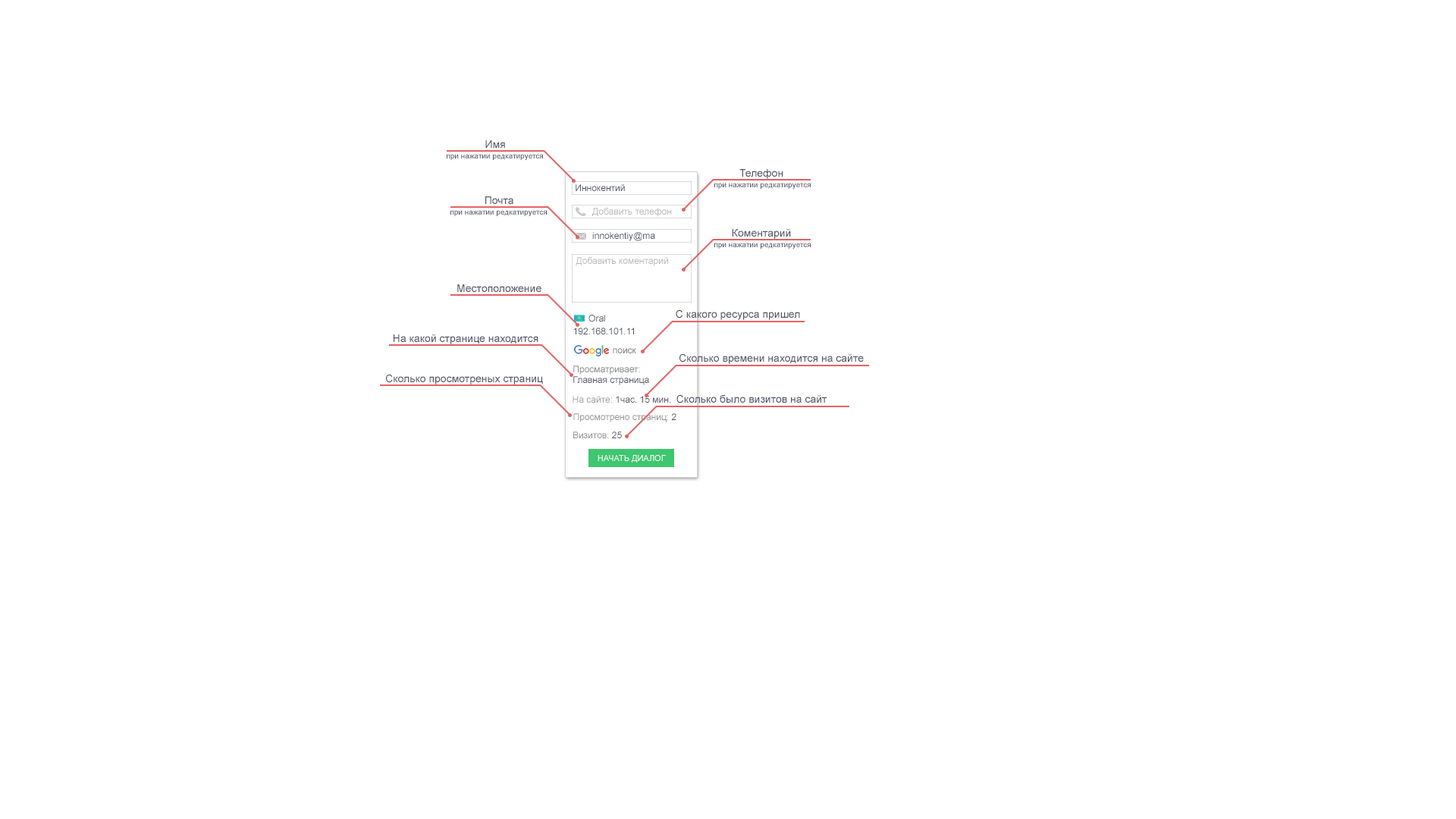
<style>
.page{position:relative;width:1456px;height:819px;background:#ffffff}
.page>*{position:absolute;margin:0}
.t1{font:10.6px "ArialMT";color:#515567}
.t2{font:7.6px "ArialMT";color:#515567}
.t3{font:9.1px "ArialMT";color:#515567}
.t4{font:9.1px "ArialMT";color:#b9b9b9}
.t5{font:9.1px "ArialMT";color:#b5b5b5}
.t6{font:9.1px "ArialMT";color:#787878}
.t7{font:9.1px "ArialMT";color:#868686}
.t8{font:9.1px "ArialMT";color:#a2a2a2}
.t9{font:9.1px "ArialMT";color:#939393}
.t10{font:8.3px "ArialMT";color:#ffffff}
</style>
<div class="page">
<p class="t1" style="left:485px;top:140px;width:20px;height:8px">Имя</p>
<p class="t2" style="left:447px;top:154px;width:96px;height:6px">при нажатии редкатируется</p>
<p class="t1" style="left:739px;top:169px;width:44px;height:10px">Телефон</p>
<p class="t3" style="left:576px;top:184px;width:49px;height:7px">Иннокентий</p>
<p class="t2" style="left:714px;top:183px;width:97px;height:6px">при нажатии редкатируется</p>
<p class="t1" style="left:485px;top:196px;width:28px;height:8px">Почта</p>
<p class="t4" style="left:592px;top:208px;width:80px;height:33px"><span class="t3"><br><br></span>Добавить телефон<br><br><span class="t3">innokentiy@ma</span></p>
<p class="t2" style="left:450px;top:210px;width:97px;height:6px">при нажатии редкатируется</p>
<p class="t1" style="left:732px;top:228px;width:59px;height:11px">Коментарий</p>
<p class="t2" style="left:714px;top:243px;width:97px;height:6px">при нажатии редкатируется</p>
<p class="t4" style="left:576px;top:257px;width:92px;height:9px">Добавить коментарий</p>
<p class="t1" style="left:457px;top:284px;width:84px;height:8px">Местоположение</p>
<p class="t3" style="left:588px;top:315px;width:17px;height:7px"><span class="t5"><br>      </span>Oral</p>
<p class="t1" style="left:676px;top:309px;width:124px;height:11px">С какого ресурса пришел</p>
<p class="t3" style="left:573px;top:328px;width:61px;height:6px">192.168.101.11</p>
<p class="t1" style="left:394px;top:334px;width:144px;height:10px">На какой странице находится</p>
<p class="t6" style="left:613px;top:348px;width:23px;height:5px">поиск</p>
<p class="t1" style="left:679px;top:353px;width:185px;height:11px">Сколько времени находится на сайте</p>
<p class="t3" style="left:573px;top:366px;width:76px;height:19px"><span class="t7">Просматривает: <br></span>Главная страница</p>
<p class="t1" style="left:386px;top:374px;width:157px;height:10px">Сколько просмотреных страниц</p>
<p class="t3" style="left:573px;top:396px;width:97px;height:7px"><span class="t8">На сайте: </span>1час. 15 мин.</p>
<p class="t1" style="left:676px;top:394px;width:151px;height:9px">Сколько было визитов на сайт</p>
<p class="t9" style="left:573px;top:413px;width:103px;height:9px">Просмотрено страниц: <span class="t3">2</span></p>
<p class="t9" style="left:573px;top:431px;width:49px;height:7px">Визитов: <span class="t3">25</span></p>
<p class="t10" style="left:598px;top:455px;width:68px;height:8px">НАЧАТЬ ДИАЛОГ</p>
</div>
